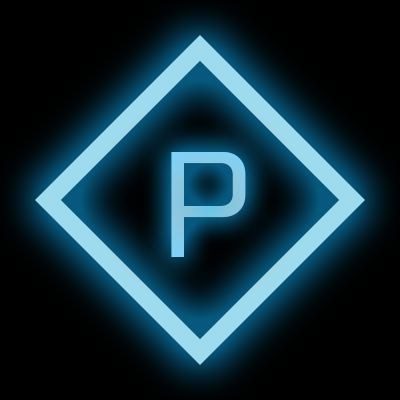
<style>
.page{position:relative;width:400px;height:400px;background:#000000}
.page>*{position:absolute;margin:0}
.t1{font:150px "Purista";color:#80d1f5}
</style>
<div class="page">
<p class="t1" style="left:171px;top:152px;width:75px;height:105px">P</p>
</div>
